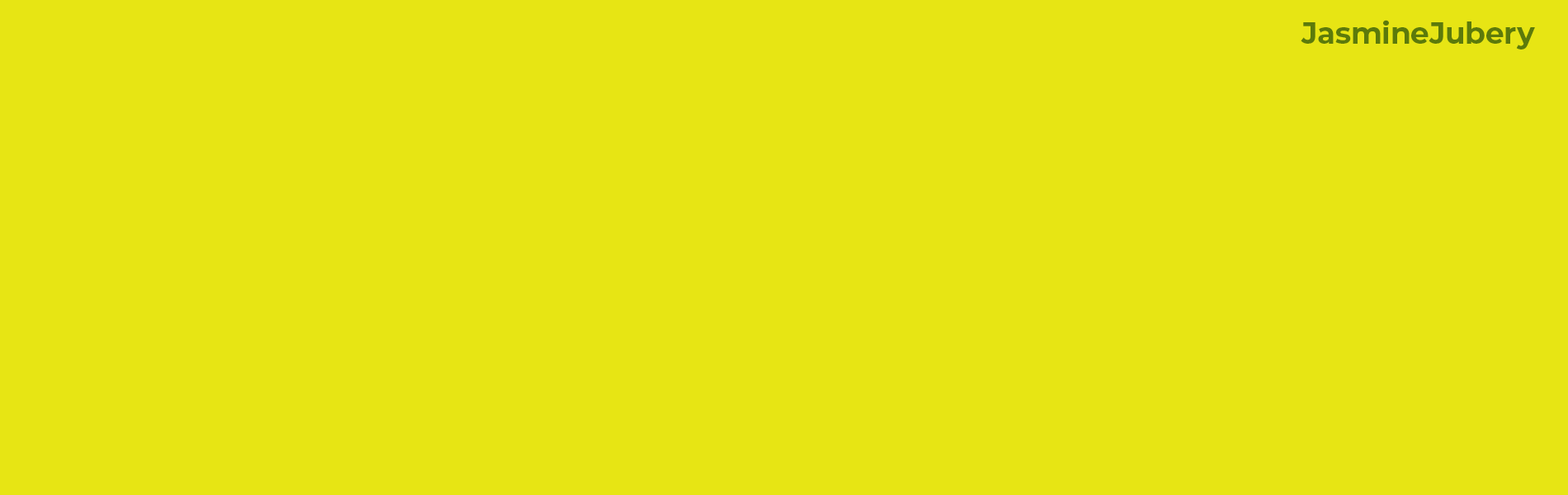
<style>
.page{position:relative;width:1568px;height:495px;background:#e7e514}
.page>*{position:absolute;margin:0}
.t1{font:29.7px "Montserrat-Bold";letter-spacing:-0.01em;color:#5c7a0b}
</style>
<div class="page">
<p class="t1" style="left:1301px;top:20px;width:234px;height:30px">JasmineJubery</p>
</div>
